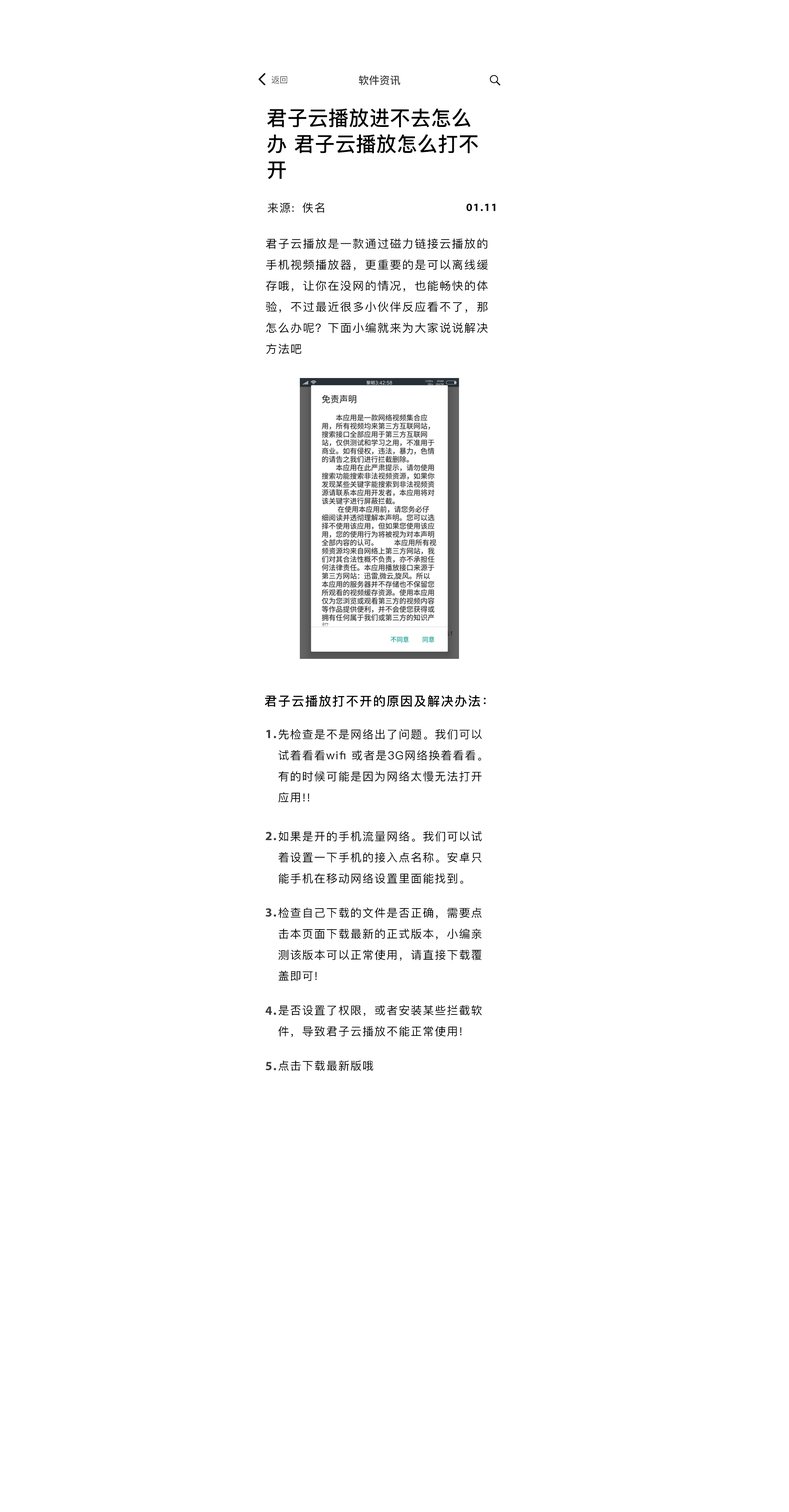
<style>
.page{position:relative;width:789px;height:1512px;background:#ffffff}
.page>*{position:absolute;margin:0}
.t1{font:8.4px "PingFang-SC-Regular";color:#000000}
.t2{font:10.5px "PingFang-SC-Bold";color:#3e3f43}
.t3{font:20.3px/25.9px "PingFang-SC-Bold";letter-spacing:0.01em;color:#000000}
.t4{font:11.2px "PingFang-SC-Medium";letter-spacing:0.075em;color:#000000}
.t5{font:11.2px "MyriadPro-Bold";letter-spacing:0.075em;color:#000000}
.t6{font:11.2px/21px "PingFang-SC-Medium";letter-spacing:0.075em;color:#000000}
.t7{font:12.6px "PingFang-SC-Bold";letter-spacing:0.075em;color:#000000}
.t8{font:12.6px "MyriadPro-Bold";letter-spacing:0.075em;color:#3e3f43}
</style>
<div class="page">
<p class="t1" style="left:271px;top:76px;width:16px;height:8px">返回</p>
<p class="t2" style="left:359px;top:75px;width:41px;height:10px">软件资讯</p>
<p class="t3" style="left:267px;top:108px;width:211px;height:71px">君子云播放进不去怎么<br>办 君子云播放怎么打不<br>开</p>
<p class="t4" style="left:267px;top:202px;width:27px;height:11px">来源:</p>
<p class="t4" style="left:303px;top:202px;width:21px;height:11px">佚名</p>
<p class="t5" style="left:466px;top:203px;width:29px;height:8px">01.11</p>
<p class="t6" style="left:266px;top:238px;width:222px;height:116px">君子云播放是一款通过磁力链接云播放的手机视频播放器，更重要的是可以离线缓存哦，让你在没网的情况，也能畅快的体验，不过最近很多小伙伴反应看不了，那怎么办呢？下面小编就来为大家说说解决方法吧</p>
<p class="t7" style="left:265px;top:695px;width:221px;height:12px">君子云播放打不开的原因及解决办法：</p>
<p class="t8" style="left:266px;top:730px;width:10px;height:8px">1.</p>
<p class="t6" style="left:278px;top:729px;width:204px;height:73px">先检查是不是网络出了问题。我们可以试着看看wifi 或者是3G网络换着看看。有的时候可能是因为网络太慢无法打开应用!!</p>
<p class="t8" style="left:265px;top:832px;width:11px;height:8px">2.</p>
<p class="t6" style="left:278px;top:831px;width:204px;height:52px">如果是开的手机流量网络。我们可以试着设置一下手机的接入点名称。安卓只能手机在移动网络设置里面能找到。</p>
<p class="t8" style="left:265px;top:908px;width:11px;height:9px">3.</p>
<p class="t6" style="left:278px;top:907px;width:204px;height:74px">检查自己下载的文件是否正确，需要点击本页面下载最新的正式版本，小编亲测该版本可以正常使用，请直接下载覆盖即可!</p>
<p class="t8" style="left:265px;top:1006px;width:11px;height:9px">4.</p>
<p class="t6" style="left:278px;top:1005px;width:204px;height:32px">是否设置了权限，或者安装某些拦截软件，导致君子云播放不能正常使用!</p>
<p class="t8" style="left:265px;top:1062px;width:11px;height:8px">5.</p>
<p class="t4" style="left:278px;top:1060px;width:95px;height:11px">点击下载最新版哦</p>
</div>
